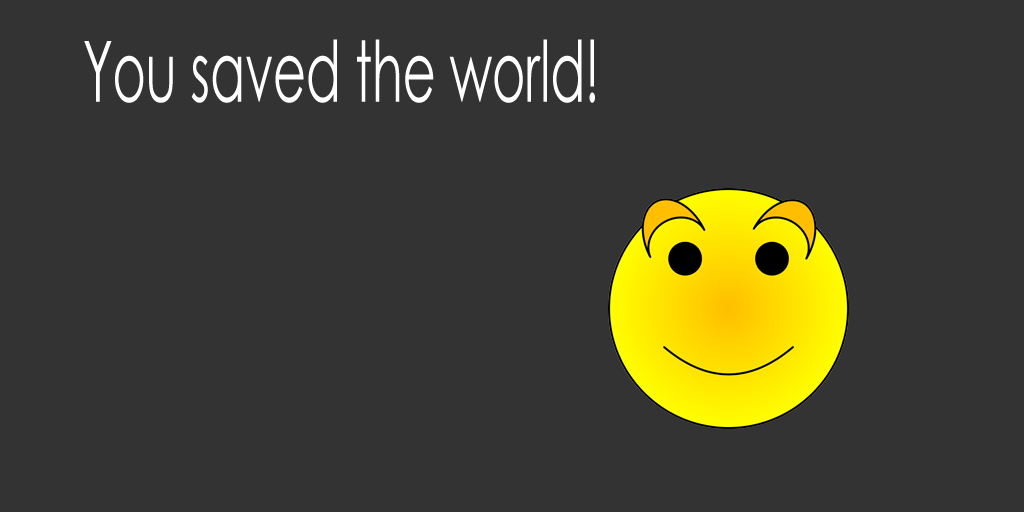
<style>
.page{position:relative;width:1024px;height:512px;background:#333333}
.page>*{position:absolute;margin:0}
.t1{font:84.6px "CenturyGothic";color:#ffffff;scale:0.6 1}
</style>
<div class="page">
<p class="t1" style="left:84px;top:39px;width:511px;height:64px">You saved the world!</p>
</div>
